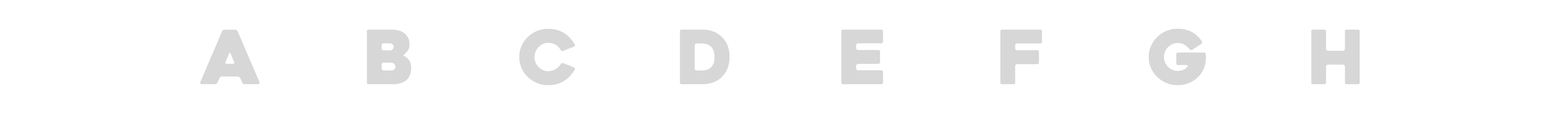
<style>
.page{position:relative;width:1568px;height:114px;background:#ffffff}
.page>*{position:absolute;margin:0}
.t1{font:74.7px "Heavitas";color:#d7d7d7}
</style>
<div class="page">
<p class="t1" style="left:200px;top:29px;width:60px;height:55px">A</p>
<p class="t1" style="left:367px;top:29px;width:44px;height:55px">в</p>
<p class="t1" style="left:519px;top:29px;width:56px;height:56px">c</p>
<p class="t1" style="left:680px;top:29px;width:49px;height:55px">d</p>
<p class="t1" style="left:841px;top:29px;width:42px;height:55px">e</p>
<p class="t1" style="left:1000px;top:29px;width:42px;height:55px">f</p>
<p class="t1" style="left:1148px;top:29px;width:58px;height:56px">g</p>
<p class="t1" style="left:1311px;top:29px;width:49px;height:55px">h</p>
</div>
